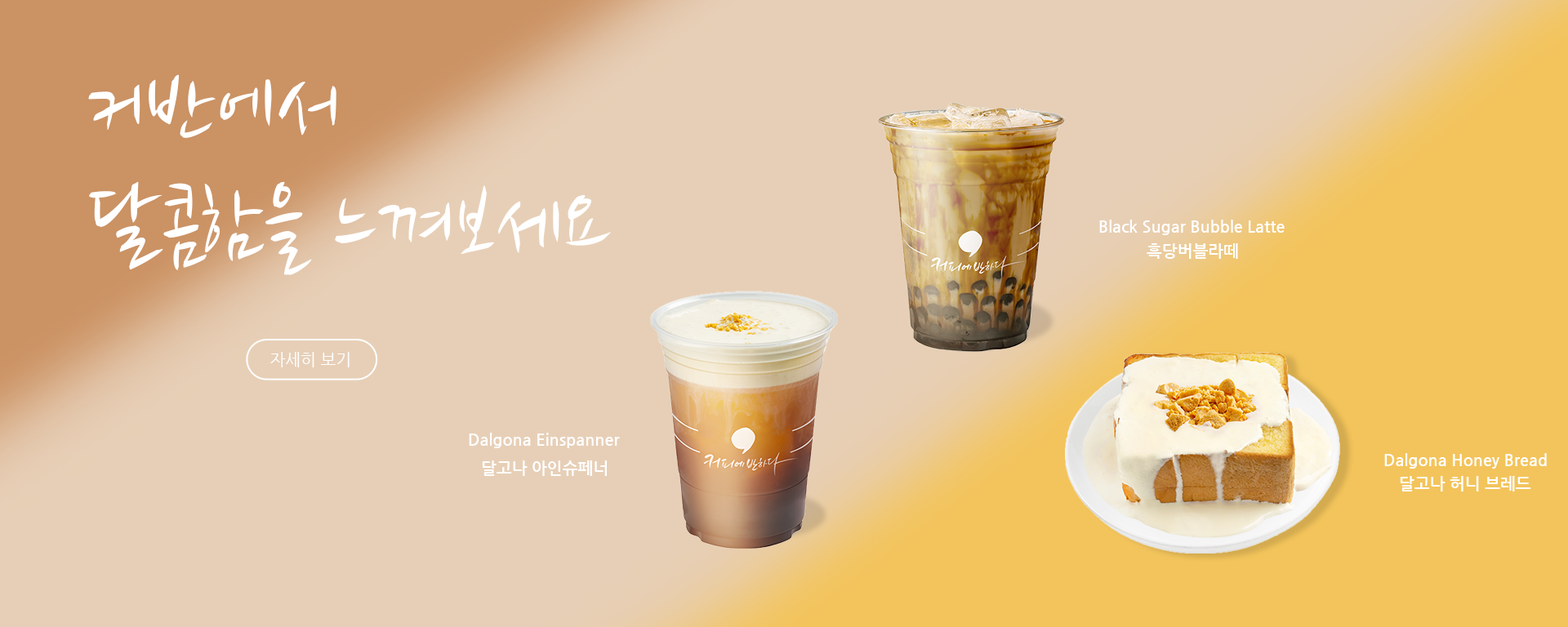
<style>
.page{position:relative;width:1568px;height:627px;background:#e7cfb7}
.page>*{position:absolute;margin:0}
.t1{font:98px "NanumBrush";color:#ffffff}
.t2{font:16.3px "NanumGothicBold";color:#ffffff}
.t3{font:16.3px "NanumGothic";color:#ffffff}
</style>
<div class="page">
<p class="t1" style="left:88px;top:74px;width:523px;height:201px">커반에서<br>달콤함을 느껴보세요</p>
<p class="t2" style="left:1099px;top:220px;width:186px;height:15px">Black Sugar Bubble Latte</p>
<p class="t2" style="left:1147px;top:243px;width:91px;height:16px">흑당버블라떼</p>
<p class="t3" style="left:270px;top:352px;width:80px;height:16px">자세히 보기</p>
<p class="t2" style="left:469px;top:433px;width:151px;height:15px">Dalgona Einspanner</p>
<p class="t2" style="left:482px;top:461px;width:125px;height:15px">달고나 아인슈페너</p>
<p class="t2" style="left:1384px;top:453px;width:163px;height:16px">Dalgona Honey Bread</p>
<p class="t2" style="left:1400px;top:476px;width:131px;height:16px">달고나 허니 브레드</p>
</div>
